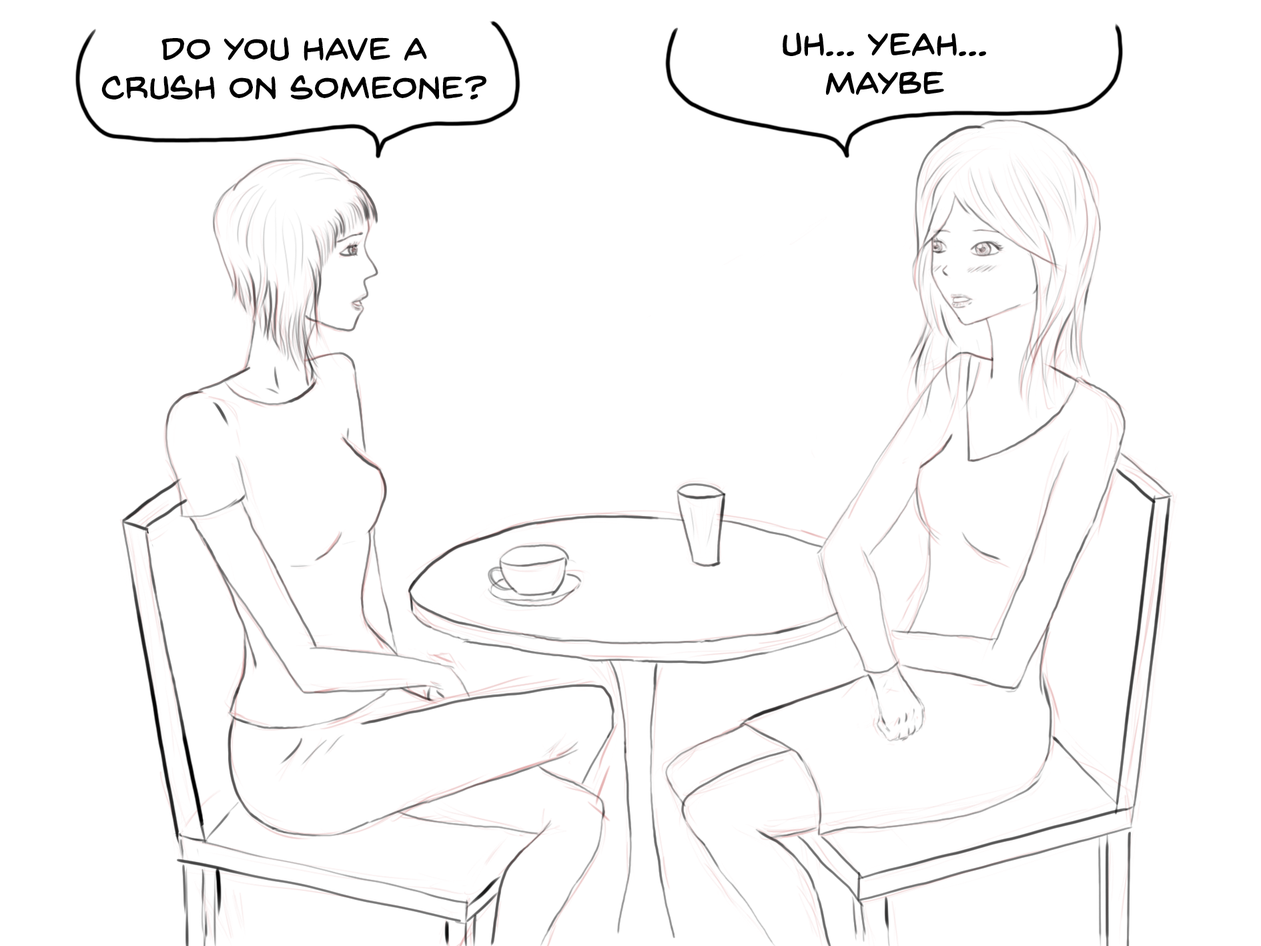
<style>
.page{position:relative;width:1261px;height:946px;background:#ffffff}
.page>*{position:absolute;margin:0}
.t1{font:33.4px/38.9px "BackIssuesBB";color:#000000}
</style>
<div class="page">
<p class="t1" style="left:101px;top:37px;width:385px;height:62px;text-align:center">Do you have a<br>crush on someone?</p>
</div>
